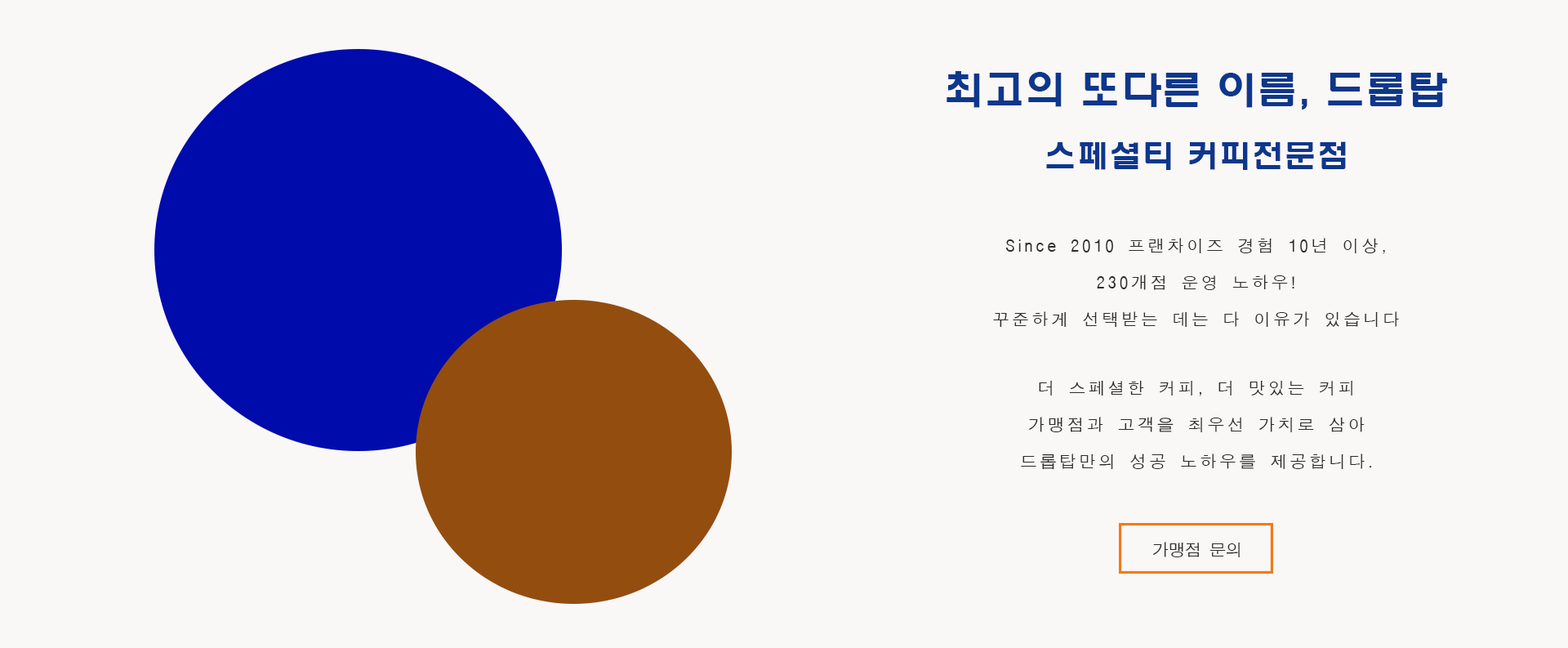
<style>
.page{position:relative;width:1568px;height:648px;background:#faf7f7}
.page>*{position:absolute;margin:0}
.t1{font:40.8px "HYwulB";color:#0d378c}
.t2{font:32.7px "HYwulB";color:#0d378c}
.t3{font:16.3px/36.8px "ÈÞ¸Õ°íµñ";letter-spacing:0.2em;color:#2d2b2b}
.t4{font:16.3px "ÈÞ¸Õ°íµñ";color:#2d2b2b}
</style>
<div class="page">
<p class="t1" style="left:947px;top:71px;width:500px;height:39px">최고의 또다른 이름, 드롭탑</p>
<p class="t2" style="left:1046px;top:141px;width:300px;height:29px">스페셜티 커피전문점</p>
<p class="t3" style="left:993px;top:238px;width:406px;height:89px;text-align:center">Since 2010 프랜차이즈 경험 10년 이상,<br>230개점 운영 노하우!<br>꾸준하게 선택받는 데는 다 이유가 있습니다</p>
<p class="t3" style="left:1021px;top:380px;width:351px;height:90px;text-align:center">더 스페셜한 커피, 더 맛있는 커피<br>가맹점과 고객을 최우선 가치로 삼아<br>드롭탑만의 성공 노하우를 제공합니다.</p>
<p class="t4" style="left:1152px;top:541px;width:89px;height:16px">가맹점 문의</p>
</div>
